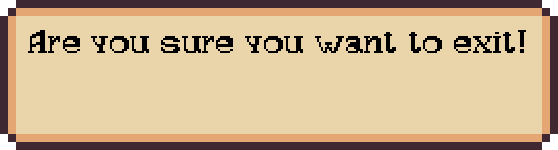
<style>
.page{position:relative;width:558px;height:150px;background:#ead4aa}
.page>*{position:absolute;margin:0}
.t1{font:33.8px "OfMiceAndCats";color:#000000}
</style>
<div class="page">
<p class="t1" style="left:28px;top:30px;width:498px;height:23px">Are you sure you want to exit!</p>
</div>
